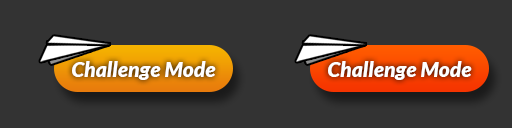
<style>
.page{position:relative;width:512px;height:128px;background:#333333}
.page>*{position:absolute;margin:0}
.t1{font:21px "Lato-BlackItalic";color:#ffffff}
</style>
<div class="page">
<p class="t1" style="left:72px;top:61px;width:144px;height:19px">Challenge Mode</p>
<p class="t1" style="left:328px;top:61px;width:144px;height:19px">Challenge Mode</p>
</div>
